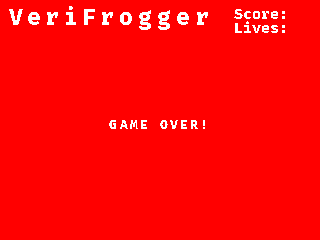
<style>
.page{position:relative;width:320px;height:240px;background:#ff0000}
.page>*{position:absolute;margin:0}
.t1{font:23.1px "FiraCode-Bold";letter-spacing:0.2em;color:#ffffff}
.t2{font:14.9px "FiraCode-Bold";color:#ffffff}
.t3{font:12.6px "FiraCode-Bold";letter-spacing:0.2em;color:#ffffff}
.t4{font:12.6px "FCE";letter-spacing:0.2em;color:#ffffff}
</style>
<div class="page">
<p class="t1" style="left:9px;top:6px;width:199px;height:24px">VeriFrogger</p>
<p class="t2" style="left:234px;top:9px;width:51px;height:10px">Score:</p>
<p class="t2" style="left:235px;top:21px;width:50px;height:12px">Lives:</p>
<p class="t3" style="left:109px;top:120px;width:96px;height:9px">GAME OVER<span class="t4">!</span></p>
</div>
